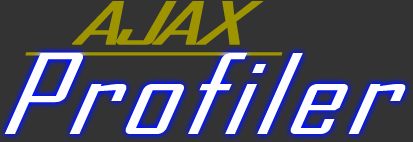
<style>
.page{position:relative;width:413px;height:142px;background:#333333}
.page>*{position:absolute;margin:0}
.t1{font:59.6px "AgencyFB-Reg";letter-spacing:-0.1em;color:#9d9400;font-weight:bold;font-style:italic;text-decoration:underline;scale:2.08 1}
.t2{font:59.6px "AgencyFB-Reg";letter-spacing:-0.059em;color:#9d9400;font-weight:bold;font-style:italic;text-decoration:underline;scale:2.08 1}
.t3{font:59.6px "AgencyFB-Reg";letter-spacing:-0.07em;color:#9d9400;font-weight:bold;font-style:italic;text-decoration:underline;scale:2.08 1}
.t4{font:108.6px "AgencyFB-Reg";letter-spacing:0.04em;color:#fefefe;font-style:italic;scale:1.34 1}
</style>
<div class="page">
<p class="t1" style="left:25px;top:1px;width:258px;height:55px"><span class="t2">  </span>AJ<span class="t3">AX</span></p>
<p class="t4" style="left:4px;top:53px;width:402px;height:81px">Profiler</p>
</div>
